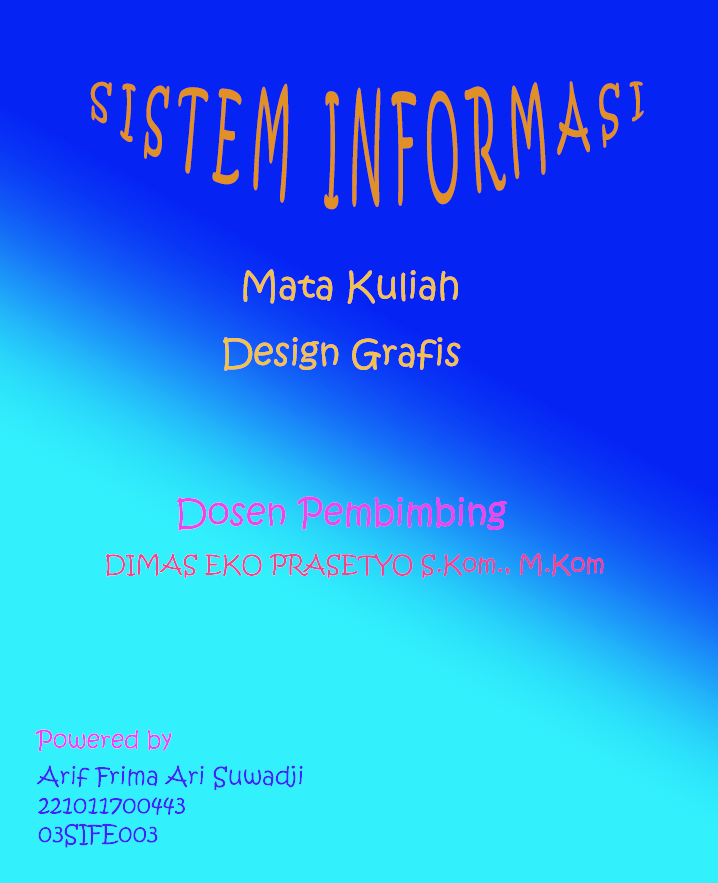
<style>
.page{position:relative;width:718px;height:883px;background:#0524f4}
.page>*{position:absolute;margin:0}
.t1{font:36px "KristenITC-Regular";color:#e19026}
.t2{font:36px "KristenITC-Regular";color:#f0c444}
.t3{font:36px "KristenITC-Regular";color:#f044eb}
.t4{font:24px "KristenITC-Regular";color:#f04488}
.t5{font:24px "KristenITC-Regular";color:#f33cfa}
.t6{font:24px "KristenITC-Regular";color:#4423f9}
</style>
<div class="page">
<p class="t1" style="left:90px;top:81px;width:554px;height:129px">S I S T E M   I N F O R M A S I</p>
<p class="t2" style="left:243px;top:269px;width:215px;height:35px">Mata Kuliah</p>
<p class="t2" style="left:223px;top:337px;width:238px;height:34px">Design Grafis</p>
<p class="t3" style="left:177px;top:496px;width:330px;height:35px">Dosen Pembimbing</p>
<p class="t4" style="left:105px;top:553px;width:499px;height:26px">DIMAS EKO PRASETYO S.Kom., M.Kom</p>
<p class="t5" style="left:35px;top:729px;width:137px;height:23px">Powered by</p>
<p class="t6" style="left:36px;top:765px;width:267px;height:83px">Arif Frima Ari Suwadji<br>221011700443<br>03SIFE003</p>
</div>
